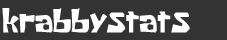
<style>
.page{position:relative;width:227px;height:40px;background:#333333}
.page>*{position:absolute;margin:0}
.t1{font:34.2px "KrabbyPatty";letter-spacing:-0.02em;color:#ffffff}
</style>
<div class="page">
<p class="t1" style="left:2px;top:8px;width:188px;height:25px">krabbystats</p>
</div>
